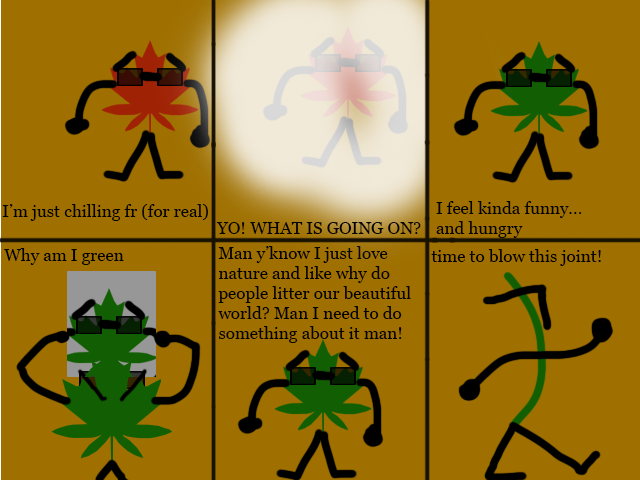
<style>
.page{position:relative;width:640px;height:480px;background:#9f7000}
.page>*{position:absolute;margin:0}
.t1{font:16.7px "Georgia";letter-spacing:0.01em;color:#010101}
.t2{font:16.7px "Georgia";letter-spacing:0.01em;color:#000000}
</style>
<div class="page">
<p class="t1" style="left:2px;top:204px;width:206px;height:17px">I’m just chilling fr (for real)</p>
<p class="t1" style="left:436px;top:201px;width:146px;height:37px">I feel kinda funny...<br>and hungry</p>
<p class="t1" style="left:216px;top:222px;width:205px;height:12px">YO! WHAT IS GOING ON?</p>
<p class="t2" style="left:218px;top:246px;width:193px;height:97px">Man y’know I just love<br>nature and like why do <br>people litter our beautiful<br>world? Man I need to do <br>something about it man!</p>
<p class="t2" style="left:4px;top:248px;width:120px;height:17px">Why am I green</p>
<p class="t2" style="left:431px;top:249px;width:170px;height:17px">time to blow this joint!</p>
</div>
